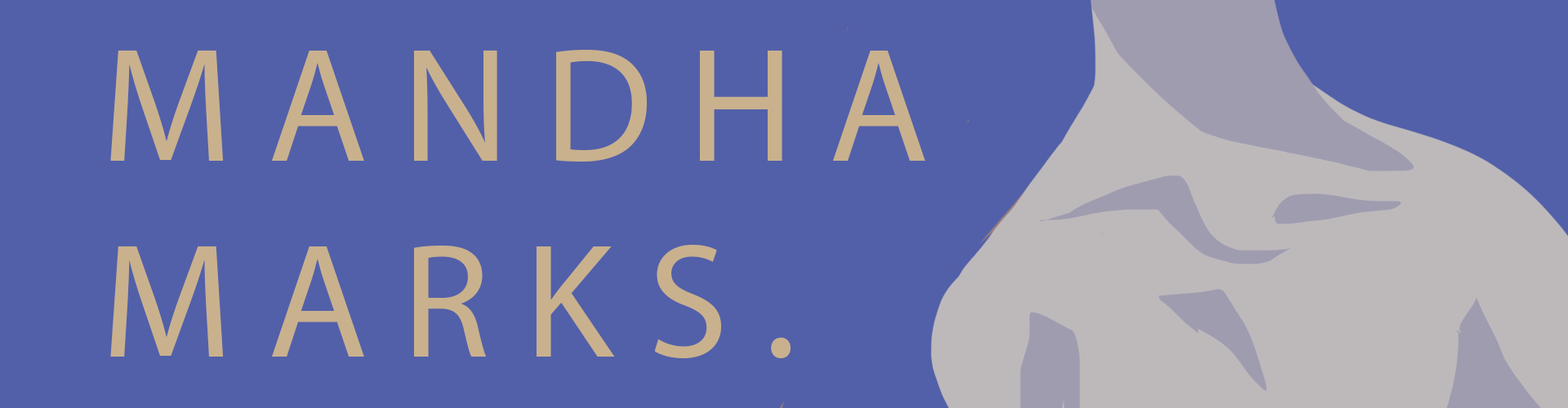
<style>
.page{position:relative;width:1568px;height:408px;background:#5260a9}
.page>*{position:absolute;margin:0}
.t1{font:163.3px "MyriadPro-Regular";color:#c9b18e}
</style>
<div class="page">
<p class="t1" style="left:110px;top:50px;width:815px;height:309px">M A N D H A<br>M A R K S .</p>
</div>
